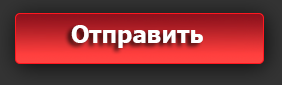
<style>
.page{position:relative;width:282px;height:85px}
.page>*{position:absolute;margin:0}
.t1{font:24px "Tahoma-Bold";color:#ffffff}
</style>
<div class="page">
<p class="t1" style="left:71px;top:25px;width:132px;height:23px">Отправить</p>
</div>
